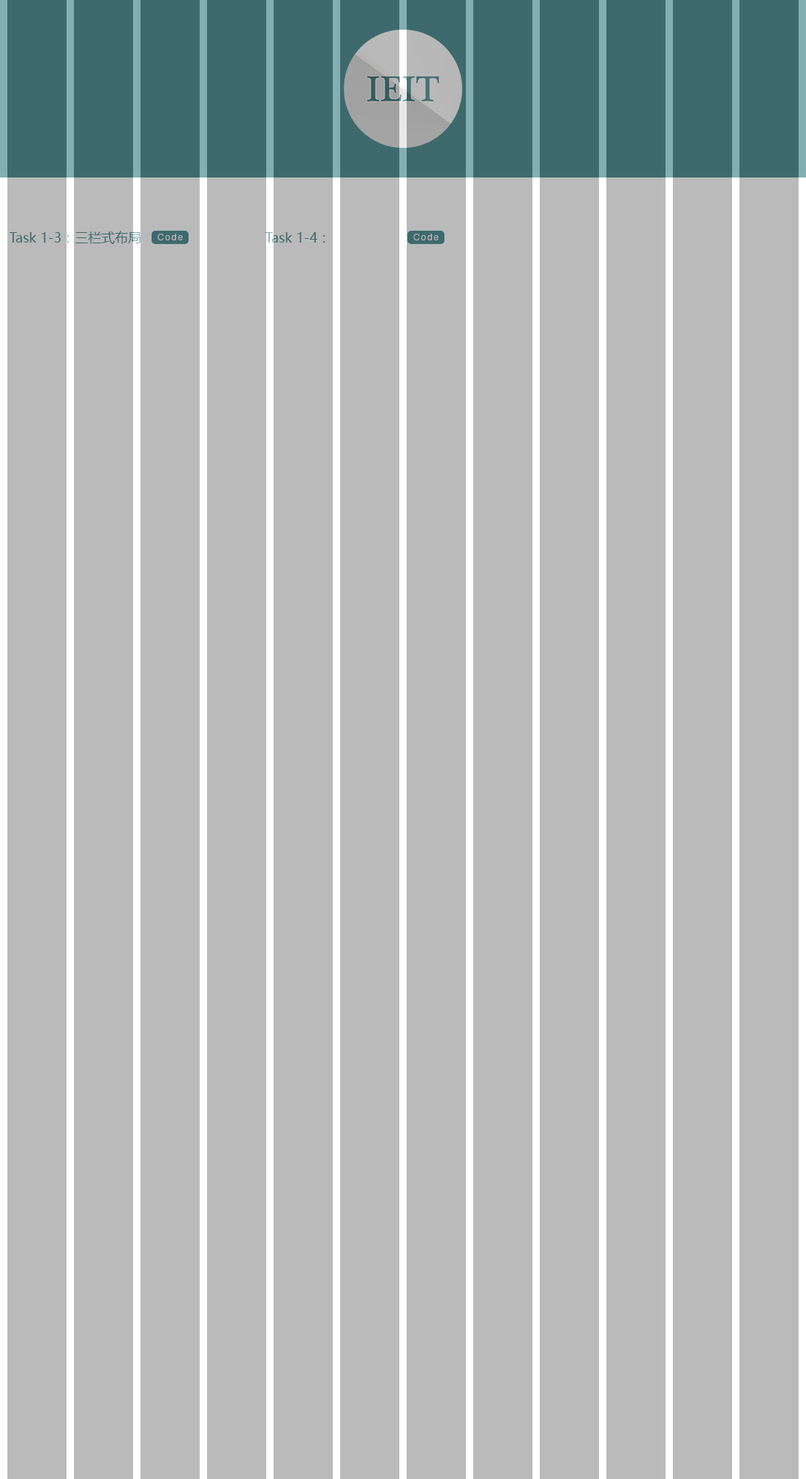
<style>
.page{position:relative;width:806px;height:1479px;background:#bababa}
.page>*{position:absolute;margin:0}
.t1{font:13.3px "MicrosoftYaHei";color:#3e6a6d}
.t2{font:13.3px "MicrosoftYaHei";color:#3e6a6d;font-variant:small-caps}
.t3{font:8.9px "Helvetica";letter-spacing:0.15em;color:#bababa}
</style>
<div class="page">
<p class="t1" style="left:10px;top:231px;width:131px;height:13px">Task 1-3<span class="t2">：三栏式布局</span></p>
<p class="t3" style="left:158px;top:234px;width:25px;height:6px">Code</p>
<p class="t1" style="left:266px;top:232px;width:59px;height:11px">Task 1-4：</p>
<p class="t3" style="left:413px;top:234px;width:26px;height:6px">Code</p>
</div>
